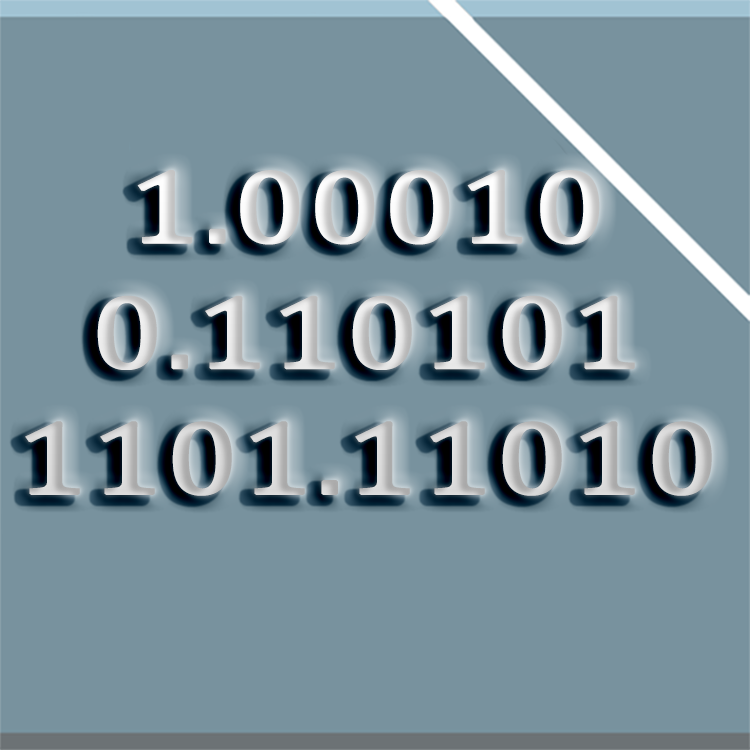
<style>
.page{position:relative;width:750px;height:750px;background:#78929e}
.page>*{position:absolute;margin:0}
.t1{font:104.7px "CambriaMath";font-weight:bold;scale:1.23 1}
</style>
<div class="page">
<p class="t1" style="left:25px;top:170px;width:687px;height:326px">1.00010<br>0.110101<br>1101.11010</p>
</div>
